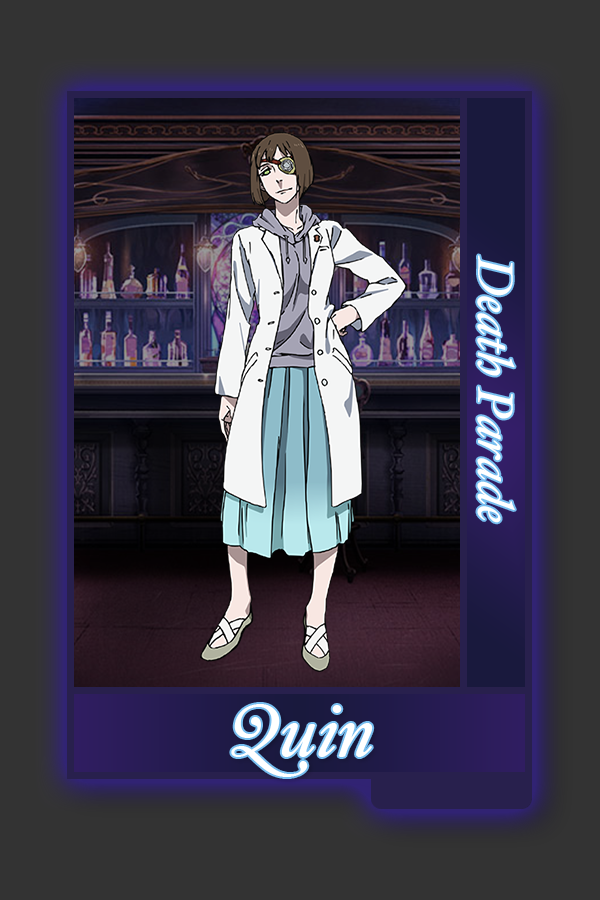
<style>
.page{position:relative;width:600px;height:900px;background:#333333}
.page>*{position:absolute;margin:0}
.t1{font:50px "HoeflerText-Italic";color:#ffffff}
.t2{font:75px "HoeflerText-Italic";color:#ffffff}
</style>
<div class="page">
<p class="t1" style="left:477px;top:255px;width:38px;height:268px;rotate:90deg">Death Parade</p>
<p class="t2" style="left:231px;top:704px;width:142px;height:73px">Quin</p>
</div>
